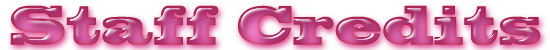
<style>
.page{position:relative;width:550px;height:50px;background:#ffffff}
.page>*{position:absolute;margin:0}
.t1{font:52px "BlackoakStd";scale:0.69 1}
</style>
<div class="page">
<p class="t1" style="left:10px;top:5px;width:531px;height:40px">Staff Credits</p>
</div>
